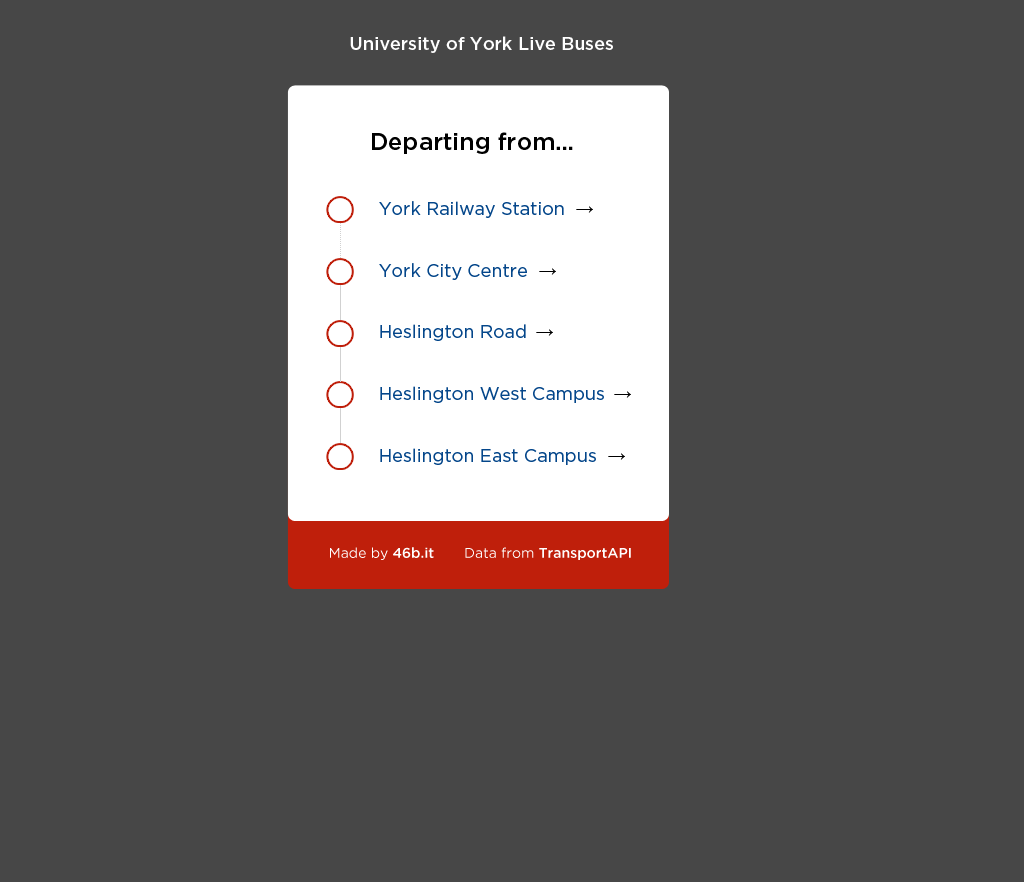
<style>
.page{position:relative;width:1024px;height:882px;background:#474747}
.page>*{position:absolute;margin:0}
.t1{font:18px "Gotham-Medium";color:#ffffff}
.t2{font:24px "Gotham-Medium";color:#000000}
.t3{font:18px "Gotham-Book";color:#04468a}
.t4{font:18px "ArialMT";color:#000000}
.t5{font:14px "Gotham-Book";color:#ffffff}
.t6{font:14px "Gotham-Medium";color:#ffffff}
</style>
<div class="page">
<p class="t1" style="left:350px;top:36px;width:263px;height:17px">University of York Live Buses</p>
<p class="t2" style="left:372px;top:132px;width:201px;height:22px">Departing from…</p>
<p class="t3" style="left:379px;top:201px;width:185px;height:17px">York Railway Station</p>
<p class="t4" style="left:576px;top:206px;width:17px;height:7px">→</p>
<p class="t3" style="left:379px;top:263px;width:148px;height:17px">York City Centre</p>
<p class="t4" style="left:539px;top:268px;width:17px;height:7px">→</p>
<p class="t3" style="left:380px;top:324px;width:146px;height:17px">Heslington Road</p>
<p class="t4" style="left:536px;top:329px;width:17px;height:7px">→</p>
<p class="t3" style="left:380px;top:386px;width:224px;height:17px">Heslington West Campus</p>
<p class="t4" style="left:614px;top:391px;width:17px;height:7px">→</p>
<p class="t3" style="left:380px;top:448px;width:216px;height:17px">Heslington East Campus</p>
<p class="t4" style="left:608px;top:453px;width:17px;height:7px">→</p>
<p class="t5" style="left:330px;top:547px;width:104px;height:13px">Made by <span class="t6">46b.it</span></p>
<p class="t6" style="left:465px;top:547px;width:166px;height:13px"><span class="t5">Data from </span>TransportAPI</p>
</div>
